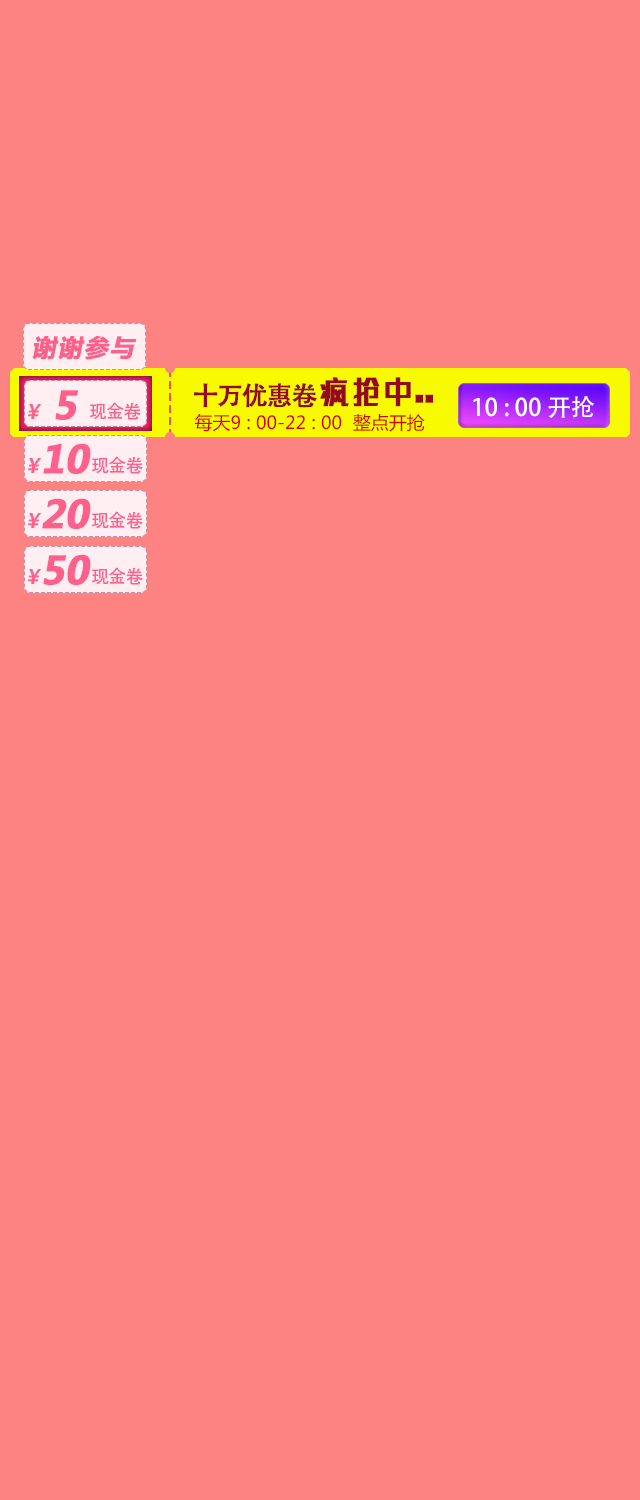
<style>
.page{position:relative;width:640px;height:1500px;background:#fd8383}
.page>*{position:absolute;margin:0}
.t1{font:24px "MicrosoftYaHei-Bold";letter-spacing:0.05em;color:#ff608b;font-weight:bold;font-style:italic}
.t2{font:46px "huxiaobo-gdh";color:#960820;font-weight:bold;scale:0.67 1}
.t3{font:18px "AdobeHeitiStd-Regular";letter-spacing:-0.05em;color:#ff608b}
.t4{font:38px "MicrosoftYaHei-Bold";color:#ff608b;font-weight:bold;font-style:italic}
.t5{font:26px "AdobeHeitiStd-Regular";letter-spacing:-0.075em;color:#960820;font-weight:bold}
.t6{font:24px "AdobeHeitiStd-Regular";color:#ffffff}
.t7{font:20px "MicrosoftYaHei-Bold";color:#ff608b;font-style:italic}
.t8{font:18px "MicrosoftYaHei";color:#d40101}
</style>
<div class="page">
<p class="t1" style="left:32px;top:336px;width:105px;height:24px">谢谢参与</p>
<p class="t2" style="left:320px;top:377px;width:114px;height:30px">疯抢中..</p>
<p class="t3" style="left:55px;top:390px;width:86px;height:30px"><span class="t4">  5          </span>现金卷</p>
<p class="t5" style="left:194px;top:383px;width:123px;height:25px">十万优惠卷</p>
<p class="t6" style="left:473px;top:396px;width:121px;height:22px">10 : 00 开抢</p>
<p class="t7" style="left:28px;top:404px;width:14px;height:15px">￥</p>
<p class="t8" style="left:195px;top:414px;width:230px;height:18px">每天9 : 00-22 : 00  整点开抢</p>
<p class="t3" style="left:43px;top:443px;width:100px;height:31px"><span class="t4"> 10  </span>现金卷</p>
<p class="t7" style="left:28px;top:458px;width:14px;height:15px">￥</p>
<p class="t3" style="left:42px;top:498px;width:101px;height:31px"><span class="t4"> 20  </span>现金卷</p>
<p class="t7" style="left:28px;top:513px;width:14px;height:15px">￥</p>
<p class="t3" style="left:43px;top:554px;width:100px;height:31px"><span class="t4"> 50  </span>现金卷</p>
<p class="t7" style="left:28px;top:569px;width:14px;height:15px">￥</p>
</div>
